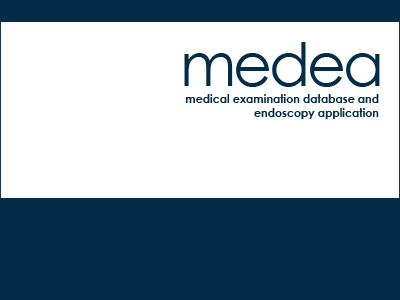
<style>
.page{position:relative;width:400px;height:300px;background:#ffffff}
.page>*{position:absolute;margin:0}
.t1{font:60px "CenturyGothic";letter-spacing:-0.05em;color:#032c47}
.t2{font:12px "CenturyGothic-Bold";color:#032c47;scale:0.92 1}
</style>
<div class="page">
<p class="t1" style="left:184px;top:42px;width:196px;height:45px">medea</p>
<p class="t2" style="left:185px;top:94px;width:194px;height:25px;text-align:right">medical examination database and<br>endoscopy application</p>
</div>
